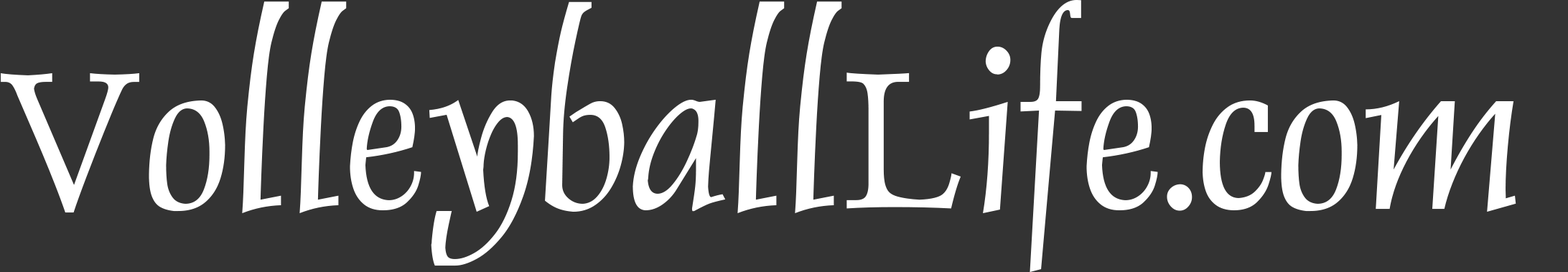
<style>
.page{position:relative;width:1568px;height:272px;background:#333333}
.page>*{position:absolute;margin:0}
.t1{font:222.5px "DolphinPlain";color:#ffffff}
</style>
<div class="page">
<p class="t1" style="left:1px;top:0px;width:1515px;height:272px">VolleyballLife.com</p>
</div>
